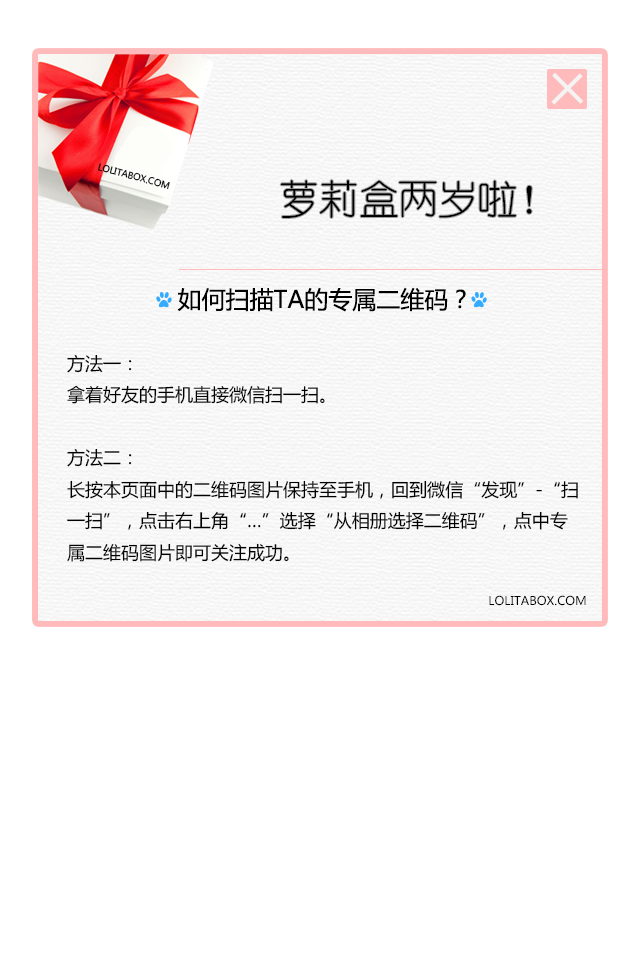
<style>
.page{position:relative;width:640px;height:960px;background:#ffffff}
.page>*{position:absolute;margin:0}
.t1{font:9px "MicrosoftYaHei";color:#000000}
.t2{font:39.8px "YouYuan";color:#000000}
.t3{font:24px "MicrosoftYaHei";color:#000000}
.t4{font:18px "MicrosoftYaHei";color:#000000}
.t5{font:12px "MicrosoftYaHei";color:#000000}
</style>
<div class="page">
<p class="t1" style="left:98px;top:163px;width:72px;height:27px;rotate:15deg">LOLITABOX.COM</p>
<p class="t2" style="left:280px;top:180px;width:252px;height:38px">萝莉盒两岁啦！</p>
<p class="t3" style="left:177px;top:287px;width:289px;height:25px">如何扫描TA的专属二维码？</p>
<p class="t4" style="left:67px;top:354px;width:511px;height:208px">方法一：<br>拿着好友的手机直接微信扫一扫。<br><br>方法二：<br>长按本页面中的二维码图片保持至手机，回到微信“发现”-“扫<br>一扫”，点击右上角“…”选择“从相册选择二维码”，点中专<br>属二维码图片即可关注成功。</p>
<p class="t5" style="left:489px;top:595px;width:97px;height:11px">LOLITABOX.COM</p>
</div>
